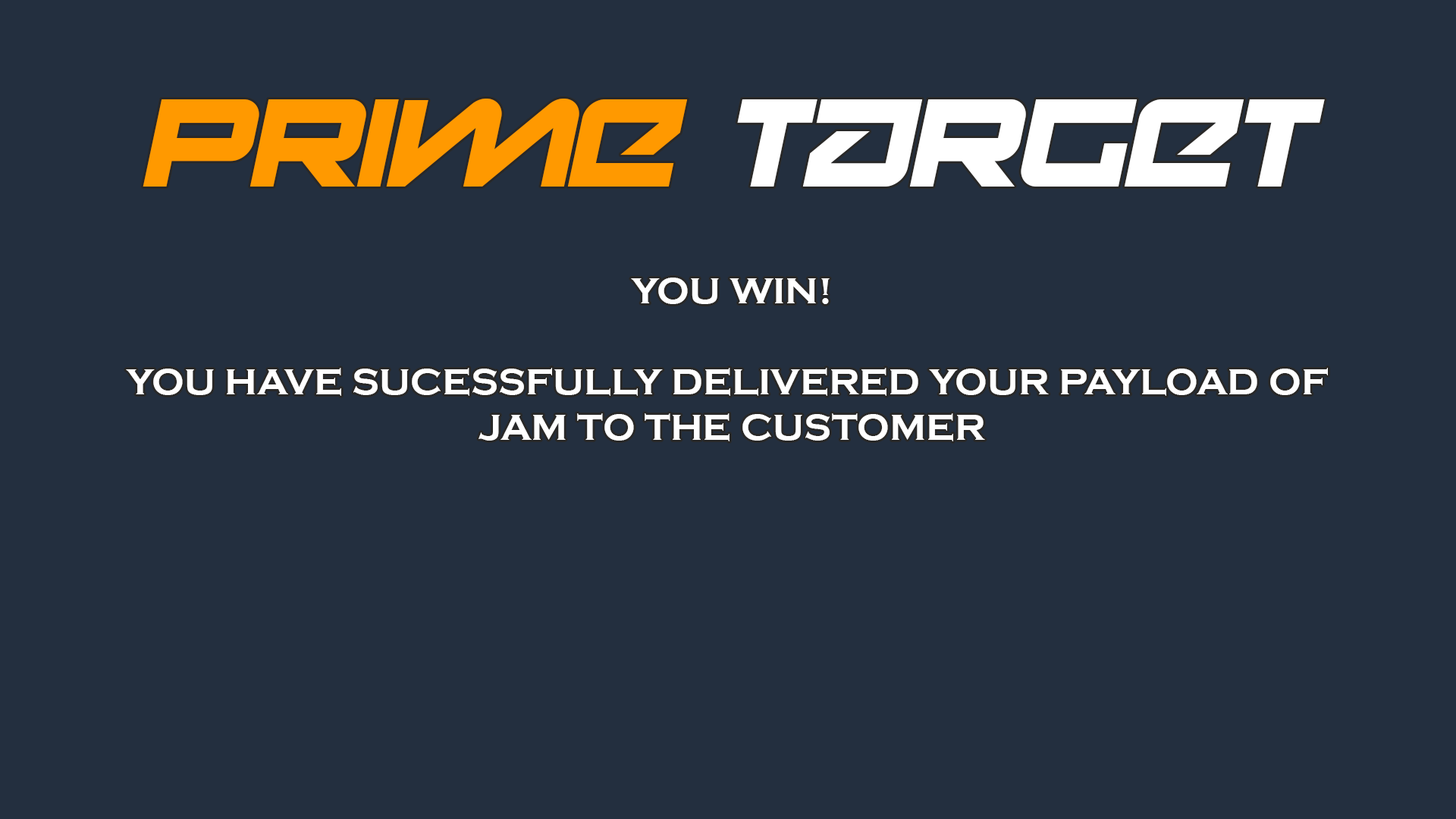
<style>
.page{position:relative;width:1456px;height:819px;background:#232f3f}
.page>*{position:absolute;margin:0}
.t1{font:29.2px "Onky-Italic";color:#ffffff}
.t2{font:29.2px "Onky-Italic";color:#ff9900}
.t3{font:37.9px "CopperplateGothic-Bold";color:#ffffff}
</style>
<div class="page">
<p class="t1" style="left:143px;top:99px;width:1182px;height:88px"><span class="t2">Prime </span>Target</p>
<p class="t3" style="left:126px;top:278px;width:1202px;height:163px;text-align:center">YOU WIN!<br><br>YOU HAVE SUCESSFULLY DELIVERED YOUR PAYLOAD OF <br>JAM TO THE CUSTOMER</p>
</div>
